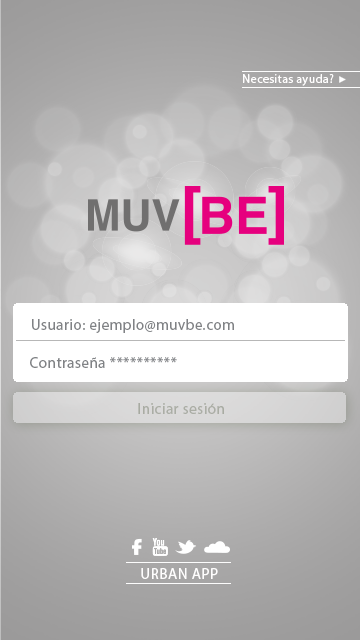
<style>
.page{position:relative;width:360px;height:640px}
.page>*{position:absolute;margin:0}
.t1{font:12px "MyriadPro-Regular";letter-spacing:0.035em;color:#fffefe}
.t2{font:15px "MyriadPro-Regular";letter-spacing:0.035em;color:#808285}
.t3{font:15px "MyriadPro-Regular";letter-spacing:0.035em;color:#fffefe;text-transform:uppercase}
</style>
<div class="page">
<p class="t1" style="left:243px;top:74px;width:91px;height:12px">Necesitas ayuda?</p>
<p class="t2" style="left:32px;top:319px;width:202px;height:14px">Usuario: ejemplo@muvbe.com</p>
<p class="t2" style="left:30px;top:357px;width:147px;height:11px">Contraseña **********</p>
<p class="t3" style="left:141px;top:568px;width:77px;height:11px">Urban app</p>
</div>
